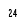
<style>
.page{position:relative;width:25px;height:25px;background:#ffffff}
.page>*{position:absolute;margin:0}
.t1{font:10.3px "Museo-300";letter-spacing:0.12em;color:#000000;scale:0.63 1}
</style>
<div class="page">
<p class="t1" style="left:8px;top:9px;width:9px;height:8px">24</p>
</div>
